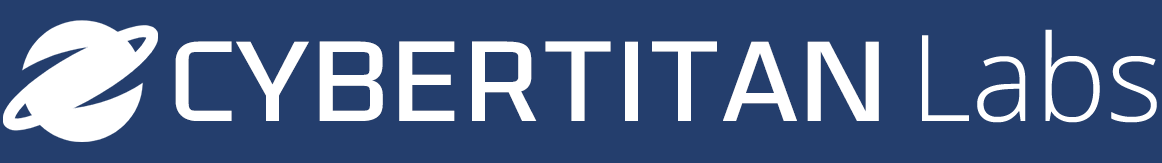
<style>
.page{position:relative;width:1162px;height:163px;background:#243e6d}
.page>*{position:absolute;margin:0}
.t1{font:119.9px "Olney-Light";color:#ffffff}
</style>
<div class="page">
<p class="t1" style="left:175px;top:41px;width:704px;height:80px">CYBERTITAN</p>
</div>
